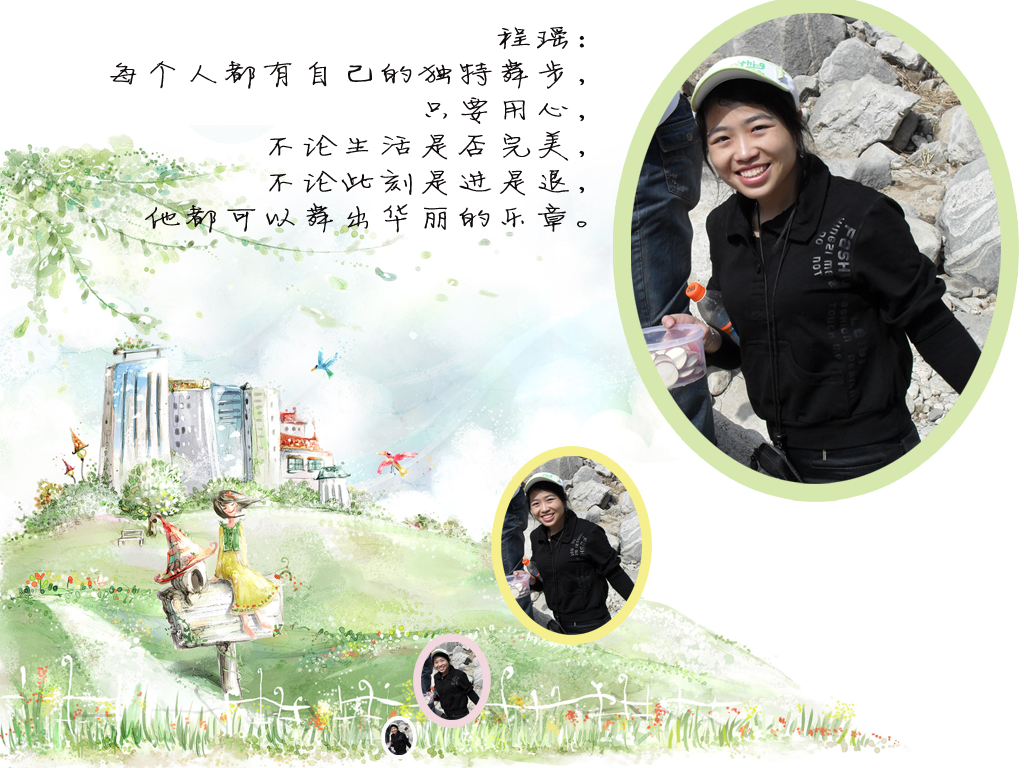
<style>
.page{position:relative;width:1024px;height:768px;background:#ffffff}
.page>*{position:absolute;margin:0}
.t1{font:30px/36px "FZJLJW--GB1-0";color:#110c0c;scale:1.3 1}
</style>
<div class="page">
<p class="t1" style="left:110px;top:26px;width:477px;height:207px;text-align:right">程瑶：<br>每个人都有自己的独特舞步，<br>只要用心，<br>不论生活是否完美，<br>不论此刻是进是退，<br>他都可以舞出华丽的乐章。</p>
</div>
